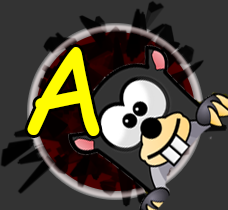
<style>
.page{position:relative;width:228px;height:210px;background:#333333}
.page>*{position:absolute;margin:0}
.t1{font:120px "ComicSansMS";color:#fffc00}
</style>
<div class="page">
<p class="t1" style="left:27px;top:47px;width:73px;height:89px">A</p>
</div>
